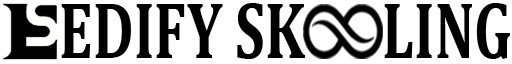
<style>
.page{position:relative;width:512px;height:64px;background:#ffffff}
.page>*{position:absolute;margin:0}
.t1{font:81.3px "Cambria-Bold";color:#000000;scale:0.72 1}
</style>
<div class="page">
<p class="t1" style="left:61px;top:3px;width:449px;height:56px">EDIFY SK      LING</p>
</div>
